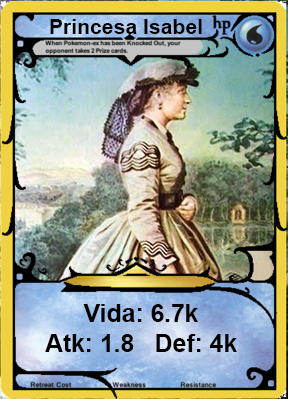
<style>
.page{position:relative;width:288px;height:399px}
.page>*{position:absolute;margin:0}
.t1{font:21.2px "Arial-BoldMT";color:#000000}
.t2{font:24.7px "Arial-BoldMT";color:#000000}
</style>
<div class="page">
<p class="t1" style="left:50px;top:19px;width:152px;height:15px">Princesa Isabel</p>
<p class="t2" style="left:45px;top:304px;width:192px;height:48px;text-align:center">Vida: 6.7k<br>Atk: 1.8   Def: 4k</p>
</div>
